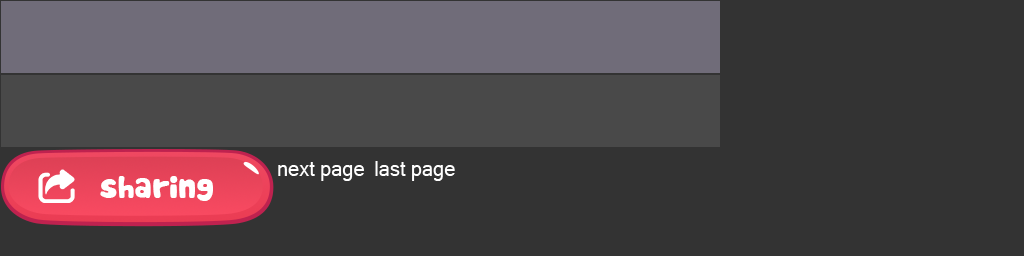
<style>
.page{position:relative;width:1024px;height:256px;background:#333333}
.page>*{position:absolute;margin:0}
.t1{font:20px "MicrosoftSansSerif";color:#ffffff}
.t2{font:30px "Cookies";color:#ffffff}
</style>
<div class="page">
<p class="t1" style="left:375px;top:161px;width:80px;height:20px">last page</p>
<p class="t1" style="left:278px;top:162px;width:86px;height:19px">next page</p>
<p class="t2" style="left:100px;top:176px;width:113px;height:25px">sharing</p>
</div>
